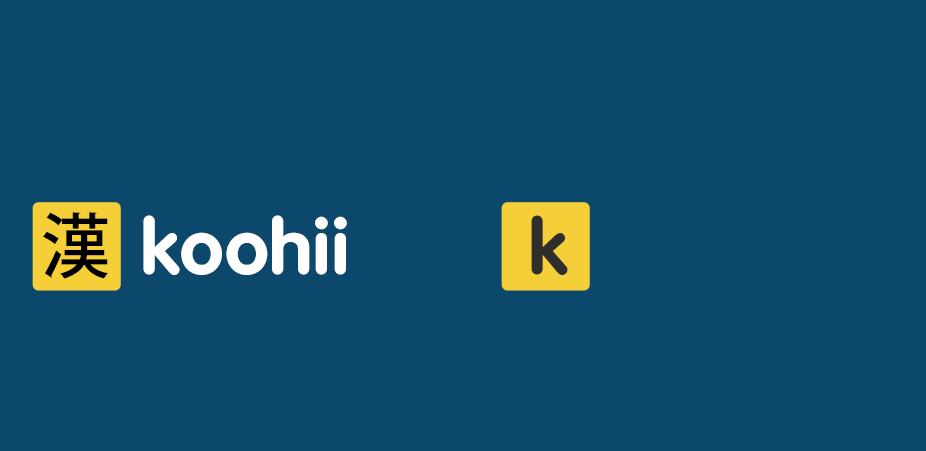
<style>
.page{position:relative;width:926px;height:451px;background:#0b486b}
.page>*{position:absolute;margin:0}
.t1{font:70.5px "KozGoPro-Medium";color:#000000}
.t2{font:76px "VAG-Rounded-Bold";color:#ffffff;scale:1.04 1}
.t3{font:76px "VAG-Rounded-Bold";color:#2f2e2c;scale:1.04 1}
</style>
<div class="page">
<p class="t1" style="left:43px;top:212px;width:65px;height:67px">漢</p>
<p class="t2" style="left:143px;top:215px;width:204px;height:60px">koohii</p>
<p class="t3" style="left:531px;top:215px;width:37px;height:60px">k</p>
</div>
